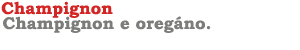
<style>
.page{position:relative;width:300px;height:50px;background:#ffffff}
.page>*{position:absolute;margin:0}
.t1{font:17px "BookmanOldStyle-Bold";color:#d42525}
.t2{font:17px "BookmanOldStyle-Bold";color:#7c7c79}
</style>
<div class="page">
<p class="t1" style="left:1px;top:1px;width:112px;height:17px">Champignon</p>
<p class="t2" style="left:3px;top:16px;width:208px;height:17px">Champignon e oregáno.</p>
</div>
